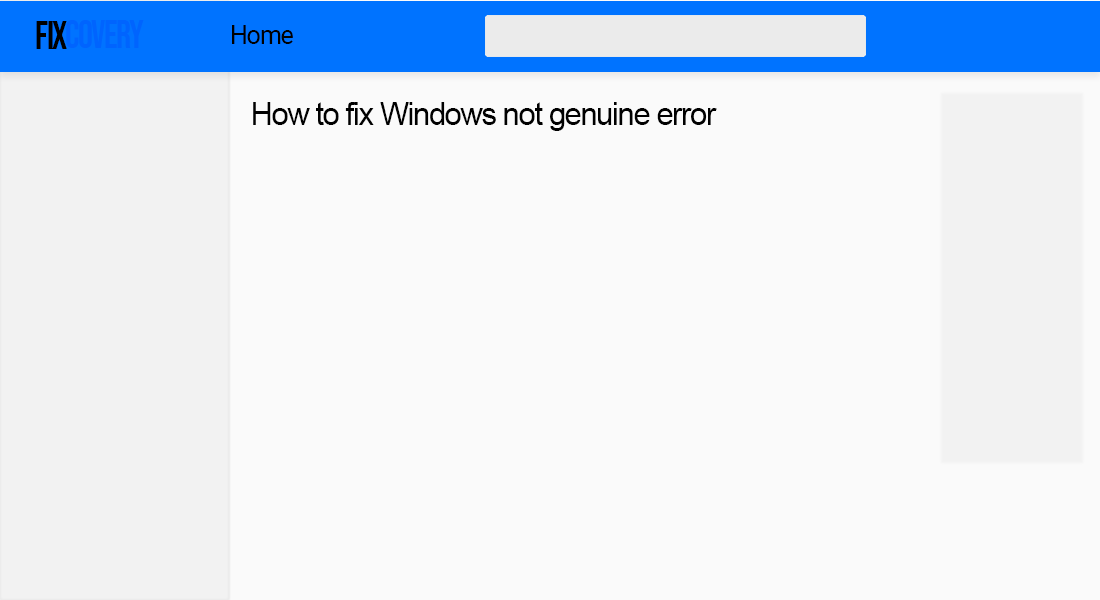
<style>
.page{position:relative;width:1100px;height:600px;background:#fafafa}
.page>*{position:absolute;margin:0}
.t1{font:39.4px "BebasNeue-Regular";letter-spacing:-0.04em;color:#000000;scale:0.95 1}
.t2{font:39.4px "BebasNeue-Regular";letter-spacing:-0.04em;color:#0064fe;scale:0.95 1}
.t3{font:26px "Roboto-Regular";letter-spacing:-0.04em;color:#000000;scale:0.95 1}
.t4{font:32.2px "ArialMT";letter-spacing:-0.04em;color:#000000;scale:0.95 1}
</style>
<div class="page">
<p class="t1" style="left:36px;top:21px;width:31px;height:28px">fix</p>
<p class="t2" style="left:66px;top:20px;width:78px;height:28px">covery</p>
<p class="t3" style="left:232px;top:25px;width:61px;height:19px">Home</p>
<p class="t4" style="left:253px;top:102px;width:464px;height:29px">How to fix Windows not genuine error</p>
</div>
